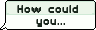
<style>
.page{position:relative;width:96px;height:30px;background:#fcfffb}
.page>*{position:absolute;margin:0}
.t1{font:10px "SFPixelate-Bold";color:#1b281e}
</style>
<div class="page">
<p class="t1" style="left:17px;top:5px;width:61px;height:21px;text-align:center">How could <br>you...</p>
<p class="t1" style="left:17px;top:6px;width:61px;height:21px;text-align:center">How could <br>you...</p>
</div>
